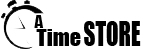
<style>
.page{position:relative;width:143px;height:49px;background:#ffffff}
.page>*{position:absolute;margin:0}
.t1{font:17px "Impact";color:#000000}
.t2{font:22px "Impact";color:#000000}
.t3{font:32.4px "Impact";color:#000000;scale:0.71 1}
</style>
<div class="page">
<p class="t1" style="left:34px;top:15px;width:10px;height:13px">A</p>
<p class="t2" style="left:36px;top:29px;width:45px;height:17px">Time</p>
<p class="t3" style="left:84px;top:21px;width:57px;height:25px">STORE</p>
</div>
